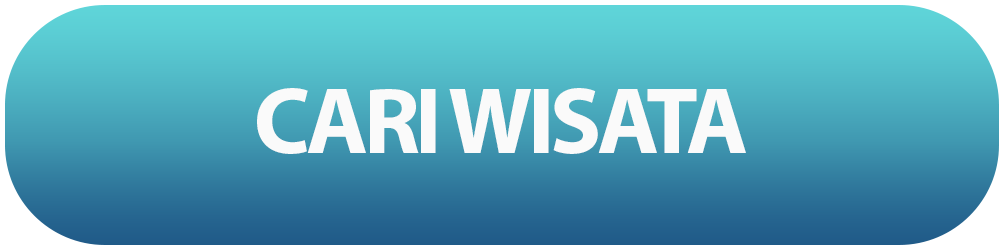
<style>
.page{position:relative;width:1004px;height:250px}
.page>*{position:absolute;margin:0}
.t1{font:94.7px "MyriadPro-Bold";letter-spacing:-0.05em;color:#fafafa}
</style>
<div class="page">
<p class="t1" style="left:257px;top:88px;width:489px;height:66px">CARI WISATA</p>
</div>
